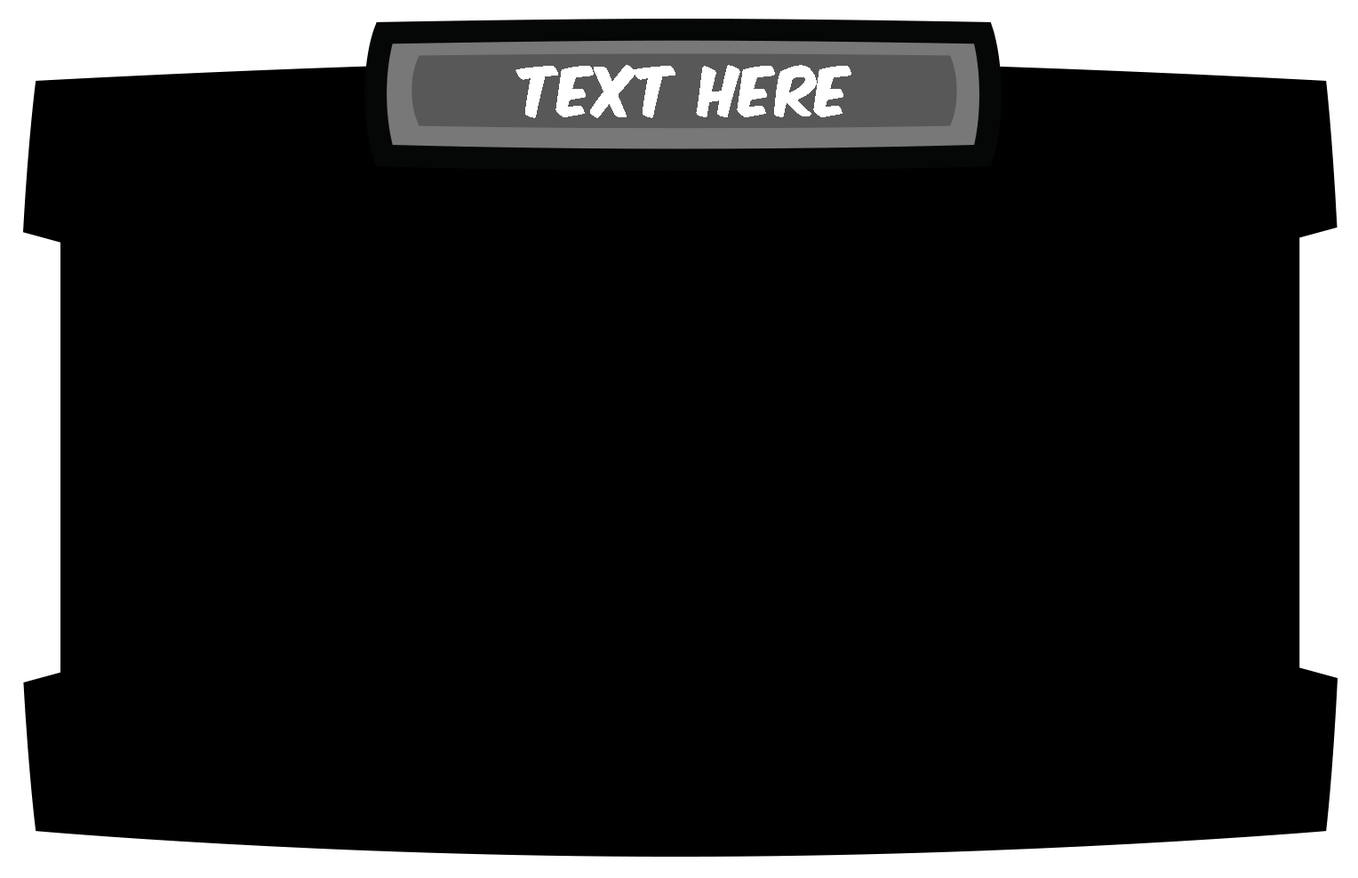
<style>
.page{position:relative;width:1358px;height:878px;background:#000000}
.page>*{position:absolute;margin:0}
.t1{font:59.1px "KomikaAxis";color:#ffffff}
</style>
<div class="page">
<p class="t1" style="left:515px;top:65px;width:336px;height:53px">TEXT HERE</p>
</div>
